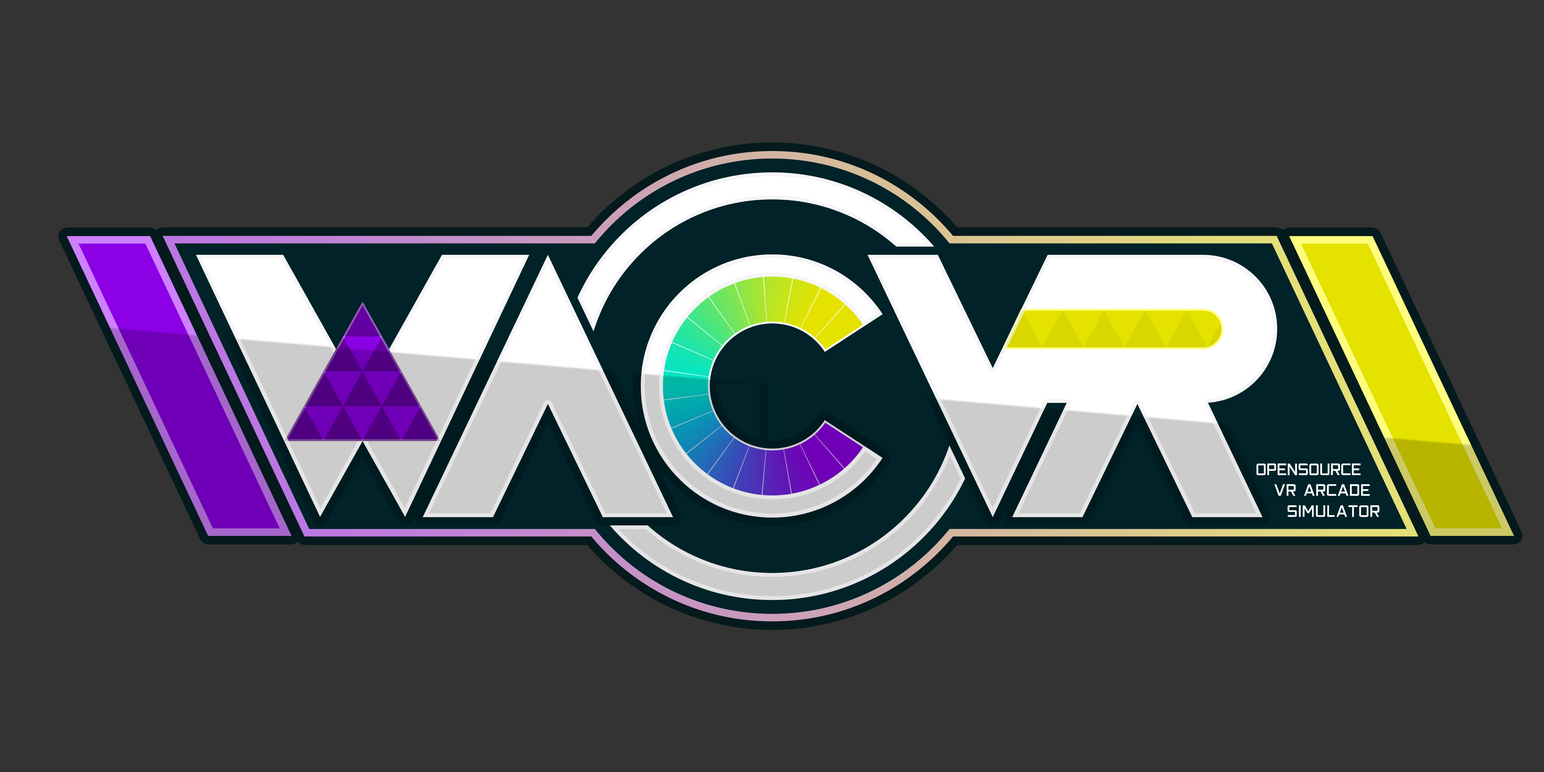
<style>
.page{position:relative;width:1544px;height:772px;background:#333333}
.page>*{position:absolute;margin:0}
.t1{font:17.6px "Closeness-Regular";letter-spacing:-0.025em;color:#ffffff}
.t2{font:17.6px "Closeness-Regular";color:#ffffff}
</style>
<div class="page">
<p class="t1" style="left:1256px;top:463px;width:105px;height:12px">OpenSource</p>
<p class="t2" style="left:1274px;top:484px;width:96px;height:12px">VR Arcade</p>
<p class="t2" style="left:1288px;top:505px;width:92px;height:12px">Simulator</p>
</div>
